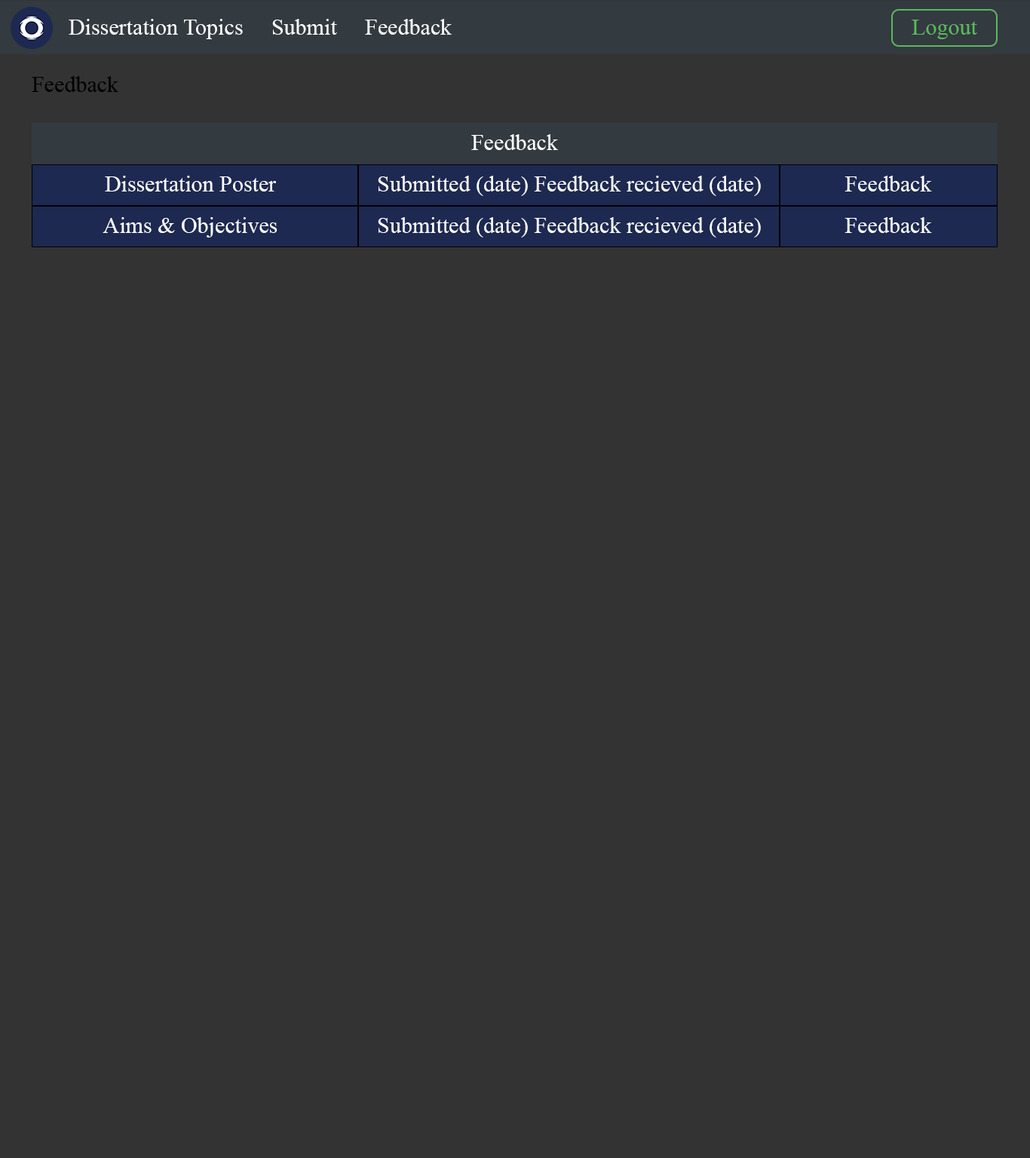
<style>
.page{position:relative;width:1030px;height:1158px;background:#333333}
.page>*{position:absolute;margin:0}
.t1{font:22.6px "TimesNewRomanPSMT";color:#ffffff}
.t2{font:22.6px "TimesNewRomanPSMT";color:#5cb85c}
.t3{font:22.6px "TimesNewRomanPSMT";color:#000000}
</style>
<div class="page">
<p class="t1" style="left:69px;top:19px;width:383px;height:20px">Dissertation Topics     Submit     Feedback</p>
<p class="t2" style="left:911px;top:20px;width:66px;height:19px">Logout</p>
<p class="t3" style="left:32px;top:76px;width:86px;height:16px">Feedback</p>
<p class="t1" style="left:471px;top:134px;width:87px;height:16px">Feedback</p>
<p class="t1" style="left:105px;top:176px;width:171px;height:15px">Dissertation Poster</p>
<p class="t1" style="left:378px;top:176px;width:383px;height:20px">Submitted (date) Feedback recieved (date)</p>
<p class="t1" style="left:844px;top:176px;width:88px;height:15px">Feedback</p>
<p class="t1" style="left:103px;top:217px;width:174px;height:20px">Aims &amp; Objectives</p>
<p class="t1" style="left:378px;top:217px;width:383px;height:20px">Submitted (date) Feedback recieved (date)</p>
<p class="t1" style="left:844px;top:217px;width:88px;height:16px">Feedback</p>
</div>
